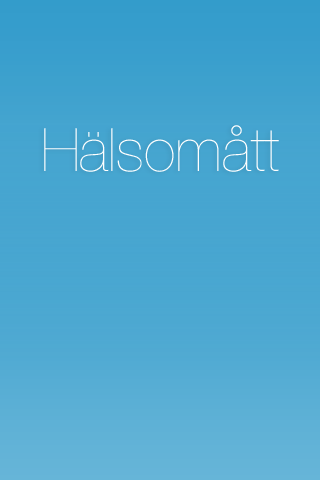
<style>
.page{position:relative;width:320px;height:480px}
.page>*{position:absolute;margin:0}
.t1{font:60px "HelveticaNeue-UltraLight";color:#ffffff}
</style>
<div class="page">
<p class="t1" style="left:44px;top:125px;width:235px;height:47px">Hälsomått</p>
</div>
